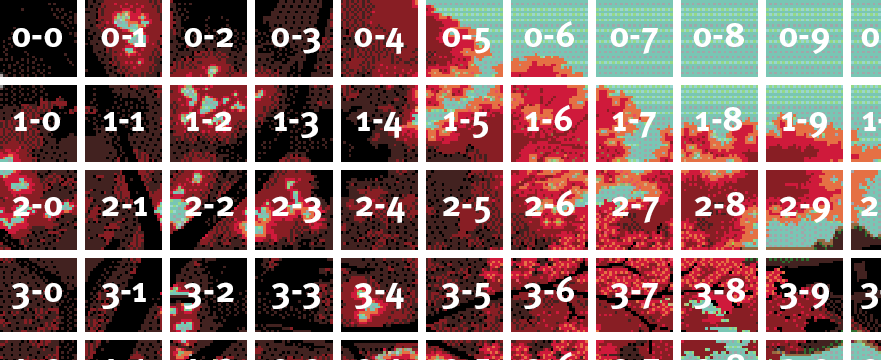
<style>
.page{position:relative;width:881px;height:360px}
.page>*{position:absolute;margin:0}
.t1{font:36px "MetaPro-Bold";color:#ffffff}
.t2{font:36.3px "MetaPro-Bold";color:#ffffff}
</style>
<div class="page">
<p class="t1" style="left:12px;top:28px;width:50px;height:19px">0-0</p>
<p class="t1" style="left:101px;top:28px;width:45px;height:19px">0-1</p>
<p class="t1" style="left:184px;top:28px;width:50px;height:19px">0-2</p>
<p class="t1" style="left:271px;top:28px;width:49px;height:26px">0-3</p>
<p class="t1" style="left:354px;top:28px;width:50px;height:26px">0-4</p>
<p class="t1" style="left:442px;top:28px;width:48px;height:26px">0-5</p>
<p class="t1" style="left:524px;top:21px;width:50px;height:26px">0-6</p>
<p class="t1" style="left:610px;top:28px;width:48px;height:26px">0-7</p>
<p class="t1" style="left:693px;top:23px;width:51px;height:24px">0-8</p>
<p class="t1" style="left:779px;top:28px;width:50px;height:26px">0-9</p>
<p class="t2" style="left:13px;top:112px;width:47px;height:19px">1-0</p>
<p class="t2" style="left:103px;top:112px;width:41px;height:19px">1-1</p>
<p class="t2" style="left:185px;top:111px;width:47px;height:20px">1-2</p>
<p class="t2" style="left:273px;top:112px;width:45px;height:26px">1-3</p>
<p class="t2" style="left:356px;top:112px;width:46px;height:26px">1-4</p>
<p class="t2" style="left:443px;top:112px;width:45px;height:26px">1-5</p>
<p class="t2" style="left:525px;top:105px;width:47px;height:26px">1-6</p>
<p class="t2" style="left:612px;top:112px;width:44px;height:26px">1-7</p>
<p class="t2" style="left:695px;top:107px;width:47px;height:24px">1-8</p>
<p class="t2" style="left:781px;top:112px;width:46px;height:26px">1-9</p>
<p class="t2" style="left:12px;top:196px;width:50px;height:20px">2-0</p>
<p class="t2" style="left:101px;top:196px;width:46px;height:20px">2-1</p>
<p class="t2" style="left:184px;top:196px;width:50px;height:20px">2-2</p>
<p class="t2" style="left:271px;top:196px;width:50px;height:27px">2-3</p>
<p class="t2" style="left:355px;top:196px;width:50px;height:27px">2-4</p>
<p class="t2" style="left:442px;top:196px;width:48px;height:27px">2-5</p>
<p class="t2" style="left:524px;top:190px;width:50px;height:26px">2-6</p>
<p class="t2" style="left:611px;top:196px;width:48px;height:27px">2-7</p>
<p class="t2" style="left:694px;top:192px;width:51px;height:24px">2-8</p>
<p class="t2" style="left:779px;top:196px;width:51px;height:27px">2-9</p>
<p class="t2" style="left:524px;top:276px;width:50px;height:33px">3-6</p>
<p class="t2" style="left:694px;top:278px;width:51px;height:31px">3-8</p>
<p class="t2" style="left:12px;top:283px;width:50px;height:26px">3-0</p>
<p class="t2" style="left:102px;top:283px;width:44px;height:26px">3-1</p>
<p class="t2" style="left:184px;top:282px;width:50px;height:27px">3-2</p>
<p class="t2" style="left:272px;top:283px;width:48px;height:26px">3-3</p>
<p class="t2" style="left:355px;top:283px;width:49px;height:26px">3-4</p>
<p class="t2" style="left:442px;top:283px;width:48px;height:26px">3-5</p>
<p class="t2" style="left:611px;top:283px;width:47px;height:26px">3-7</p>
<p class="t2" style="left:780px;top:283px;width:49px;height:26px">3-9</p>
</div>
